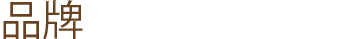
<style>
.page{position:relative;width:340px;height:39px;background:#ffffff}
.page>*{position:absolute;margin:0}
.t1{font:42px "KozGoPr6N-Regular";color:#684121}
</style>
<div class="page">
<p class="t1" style="left:3px;top:0px;width:80px;height:40px">品牌</p>
</div>
